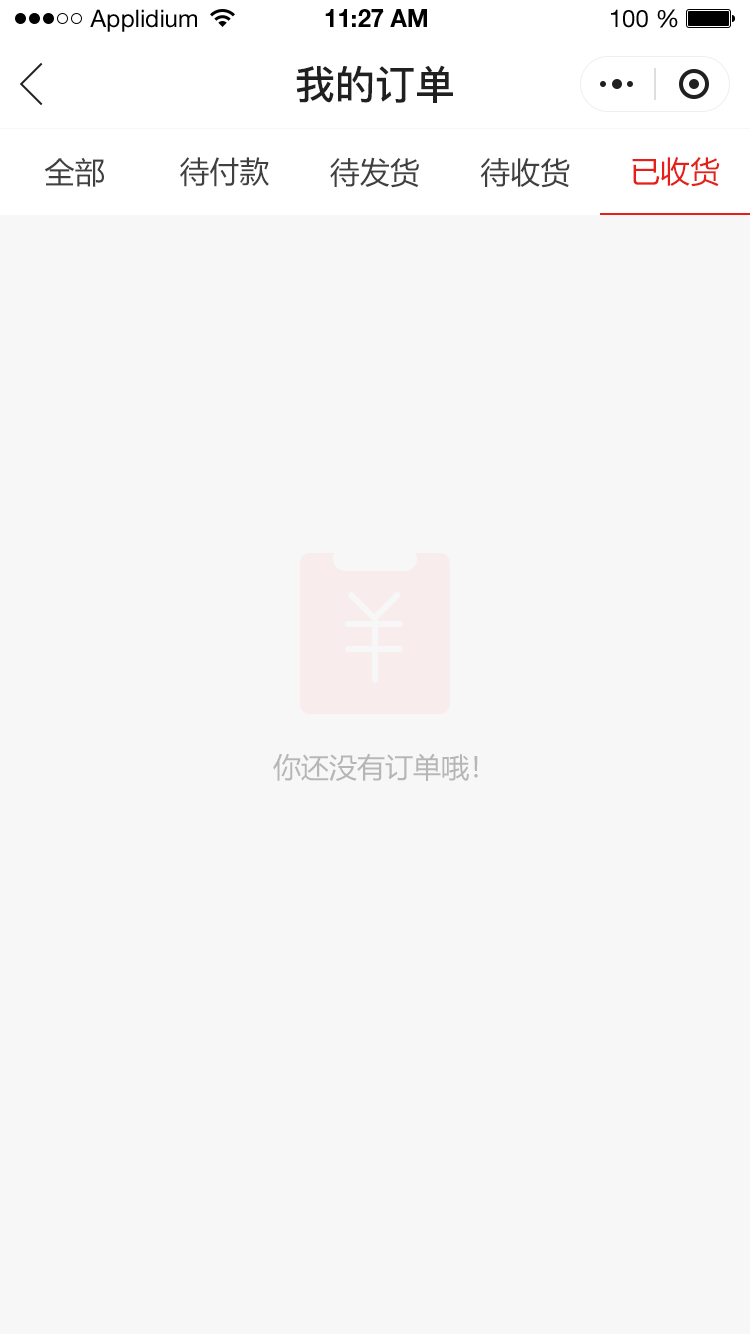
<style>
.page{position:relative;width:750px;height:1334px;background:#f7f7f7}
.page>*{position:absolute;margin:0}
.t1{font:24px "HelveticaNeueLTStd-Roman";color:#000000}
.t2{font:24px "HelveticaNeueLTStd-Bd";color:#000000}
.t3{font:40px "PingFang-SC-Bold";color:#202020;text-transform:uppercase}
.t4{font:30px "MicrosoftYaHei";color:#404040;text-transform:uppercase}
.t5{font:30px "MicrosoftYaHei";color:#e61f18;text-transform:uppercase}
.t6{font:28px "MicrosoftYaHei";color:#b6b6b6;text-transform:uppercase}
</style>
<div class="page">
<p class="t1" style="left:90px;top:9px;width:107px;height:23px">Applidium</p>
<p class="t2" style="left:325px;top:9px;width:102px;height:18px">11:27 AM</p>
<p class="t1" style="left:611px;top:9px;width:67px;height:19px">100 %</p>
<p class="t3" style="left:296px;top:65px;width:157px;height:38px">我的订单</p>
<p class="t4" style="left:44px;top:157px;width:60px;height:30px">全部</p>
<p class="t4" style="left:180px;top:157px;width:89px;height:30px">待付款</p>
<p class="t4" style="left:330px;top:157px;width:89px;height:31px">待发货</p>
<p class="t4" style="left:480px;top:158px;width:90px;height:30px">待收货</p>
<p class="t5" style="left:632px;top:157px;width:88px;height:30px">已收货</p>
<p class="t6" style="left:273px;top:753px;width:205px;height:28px">你还没有订单哦！</p>
</div>
